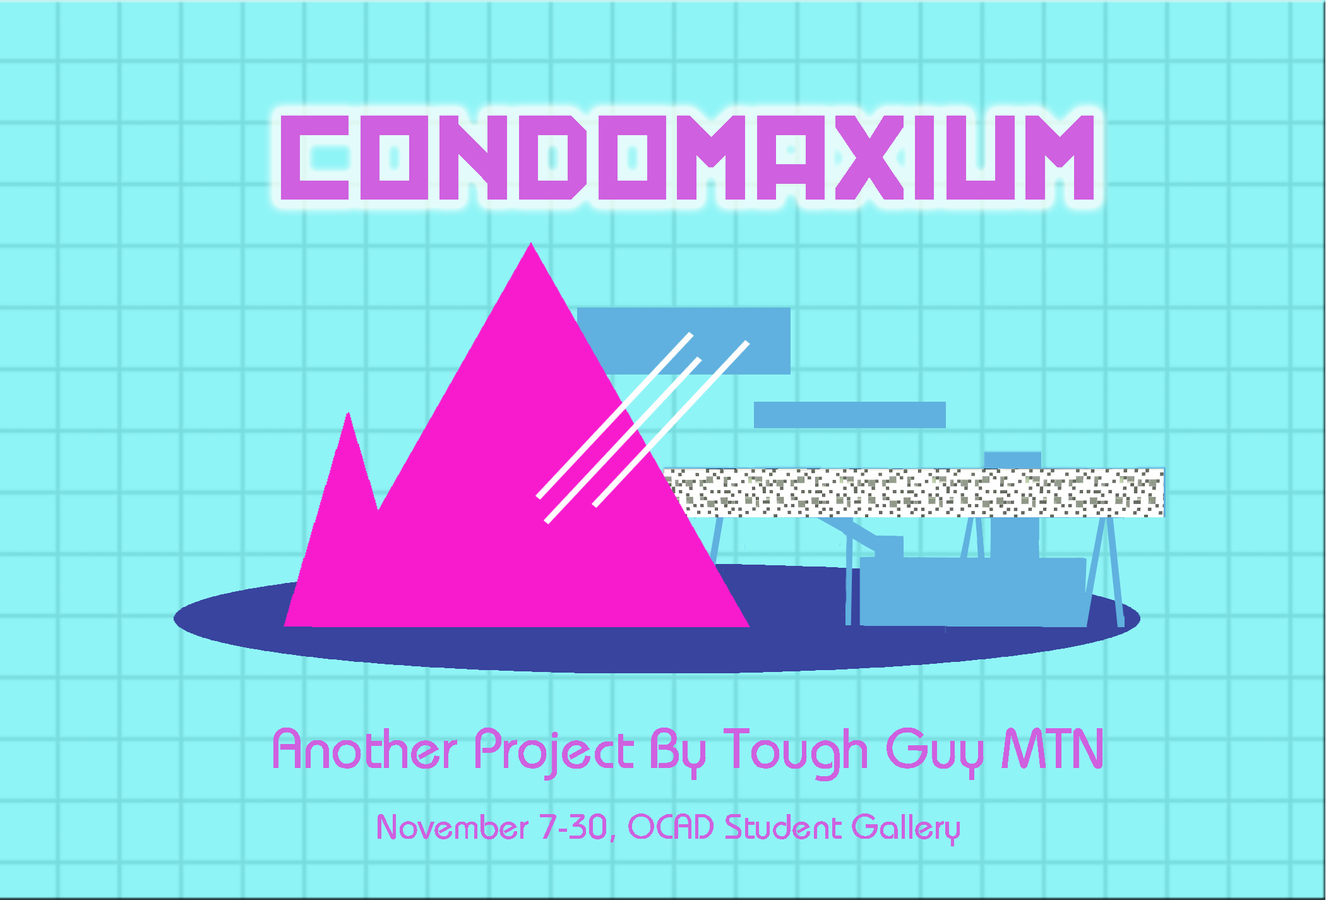
<style>
.page{position:relative;width:1326px;height:900px;background:#8ff4f6}
.page>*{position:absolute;margin:0}
.t1{font:114.4px "Kremlin";color:#cf60df}
.t2{font:56.5px "Bauhaus";color:#cf60df}
.t3{font:35.5px "Bauhaus";color:#cf60df}
</style>
<div class="page">
<p class="t1" style="left:281px;top:116px;width:812px;height:83px">CONDOMAXIUM</p>
<p class="t2" style="left:273px;top:727px;width:829px;height:54px">Another Project By Tough Guy MTN</p>
<p class="t3" style="left:377px;top:813px;width:582px;height:33px">November 7-30, OCAD Student Gallery</p>
</div>
